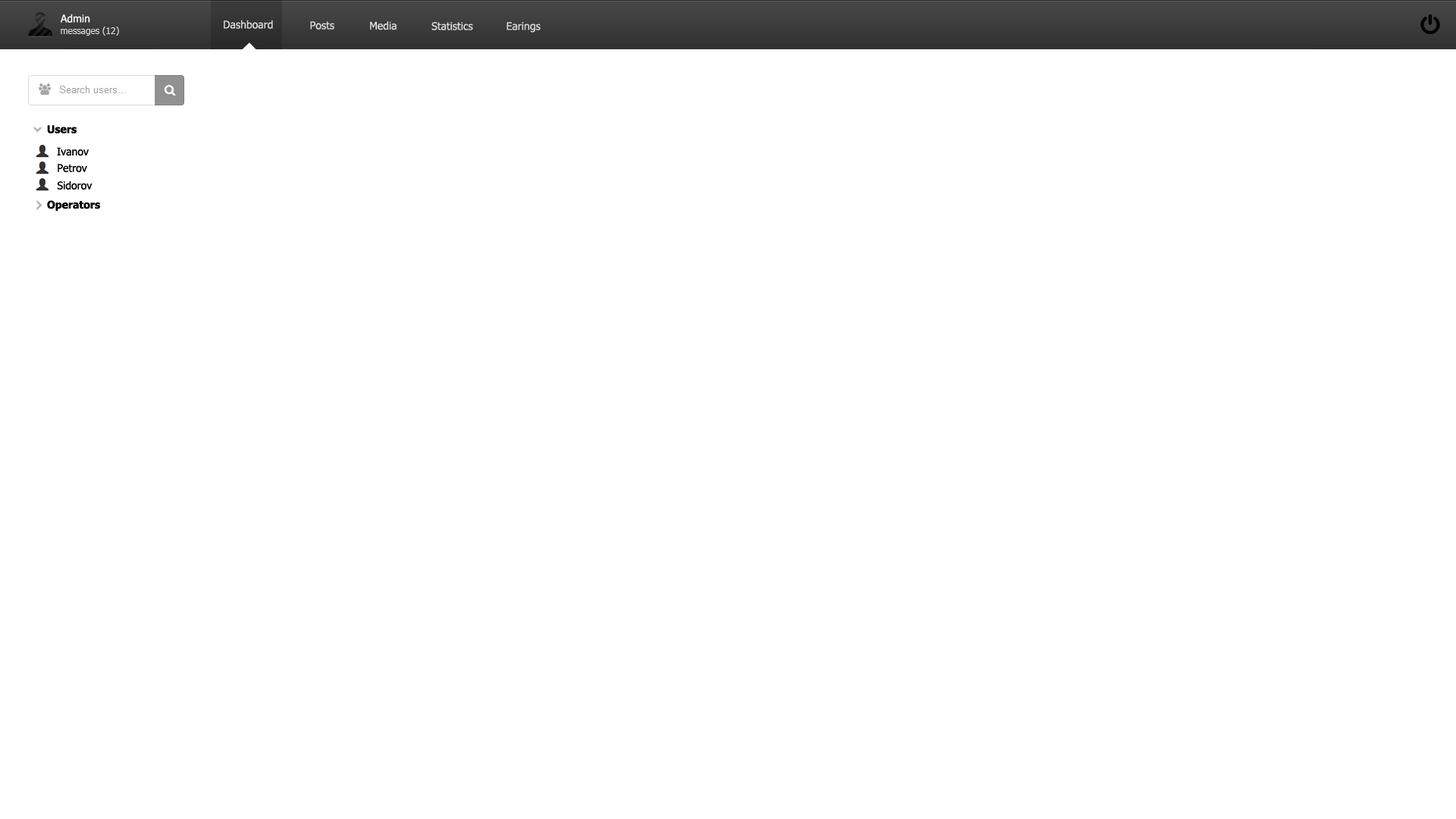
<style>
.page{position:relative;width:1456px;height:819px;background:#ffffff}
.page>*{position:absolute;margin:0}
.t1{font:9.1px "Tahoma";color:#dbdbdb}
.t2{font:10.6px "Tahoma";color:#dbdbdb}
.t3{font:10.6px "Tahoma-Bold";color:#000000}
.t4{font:10.6px "Tahoma";color:#000000}
</style>
<div class="page">
<p class="t1" style="left:61px;top:27px;width:58px;height:9px">messages (12)</p>
<p class="t2" style="left:224px;top:20px;width:49px;height:9px">Dashboard</p>
<p class="t2" style="left:310px;top:21px;width:24px;height:9px">Posts</p>
<p class="t2" style="left:370px;top:21px;width:27px;height:9px">Media</p>
<p class="t2" style="left:431px;top:22px;width:42px;height:8px">Statistics</p>
<p class="t2" style="left:507px;top:22px;width:34px;height:11px">Earings</p>
<p class="t3" style="left:47px;top:125px;width:30px;height:8px">Users</p>
<p class="t4" style="left:57px;top:147px;width:32px;height:9px">Ivanov</p>
<p class="t4" style="left:58px;top:164px;width:29px;height:8px">Petrov</p>
<p class="t4" style="left:57px;top:181px;width:36px;height:9px">Sidorov</p>
<p class="t3" style="left:47px;top:200px;width:53px;height:11px">Operators</p>
</div>
